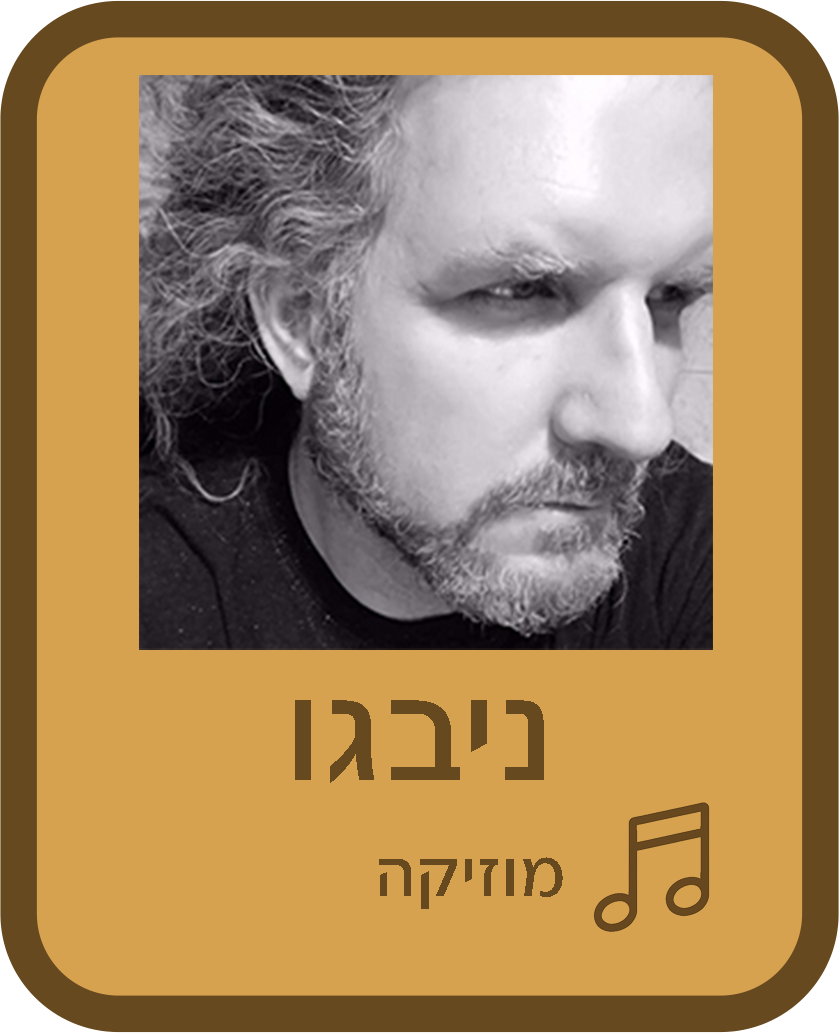
<style>
.page{position:relative;width:839px;height:1033px;background:#d7a24f}
.page>*{position:absolute;margin:0}
.t1{font:153px "NarkissTam-Medium";color:#67491f}
.t2{font:72px "NarkissTam-Medium";color:#67491f}
</style>
<div class="page">
<p class="t1" style="left:295px;top:700px;width:249px;height:83px">ניבגו</p>
<p class="t2" style="left:379px;top:857px;width:184px;height:52px">מוזיקה</p>
</div>
